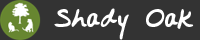
<style>
.page{position:relative;width:200px;height:40px;background:#333333}
.page>*{position:absolute;margin:0}
.t1{font:26px "RustysHand";color:#ffffff}
</style>
<div class="page">
<p class="t1" style="left:54px;top:8px;width:140px;height:32px">Shady Oak</p>
</div>
